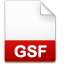
<style>
.page{position:relative;width:64px;height:64px;background:#ffffff}
.page>*{position:absolute;margin:0}
.t1{font:16px "ArialRoundedMTBold";color:#ffffff}
</style>
<div class="page">
<p class="t1" style="left:14px;top:45px;width:33px;height:13px">GSF</p>
</div>
